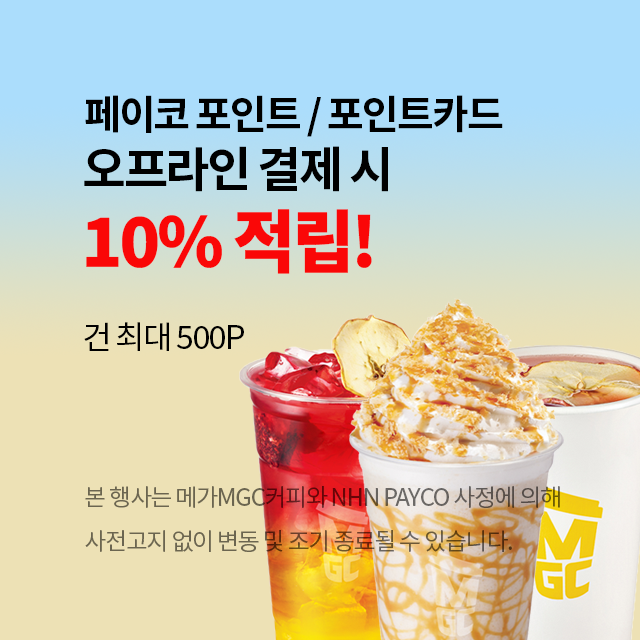
<style>
.page{position:relative;width:640px;height:640px}
.page>*{position:absolute;margin:0}
.t1{font:40px "NotoSansKR-Bold";letter-spacing:-0.05em;color:#000000}
.t2{font:48px "NotoSansKR-Bold";letter-spacing:-0.05em;color:#000000}
.t3{font:68px "NotoSansKR-Black";letter-spacing:-0.05em;color:#fa0707}
.t4{font:32px "NotoSansKR-Regular";letter-spacing:-0.05em;color:#000000}
.t5{font:24px/44px "NotoSansKR-Regular";letter-spacing:-0.055em}
</style>
<div class="page">
<p class="t1" style="left:85px;top:95px;width:418px;height:42px">페이코 포인트 / 포인트카드</p>
<p class="t2" style="left:84px;top:146px;width:304px;height:46px">오프라인 결제 시</p>
<p class="t3" style="left:86px;top:209px;width:286px;height:65px">10% 적립!</p>
<p class="t4" style="left:84px;top:322px;width:160px;height:29px">건 최대 500P</p>
<p class="t5" style="left:85px;top:486px;width:475px;height:66px">본 행사는 메가MGC커피와 NHN PAYCO 사정에 의해<br>사전고지 없이 변동 및 조기 종료될 수 있습니다.</p>
</div>
